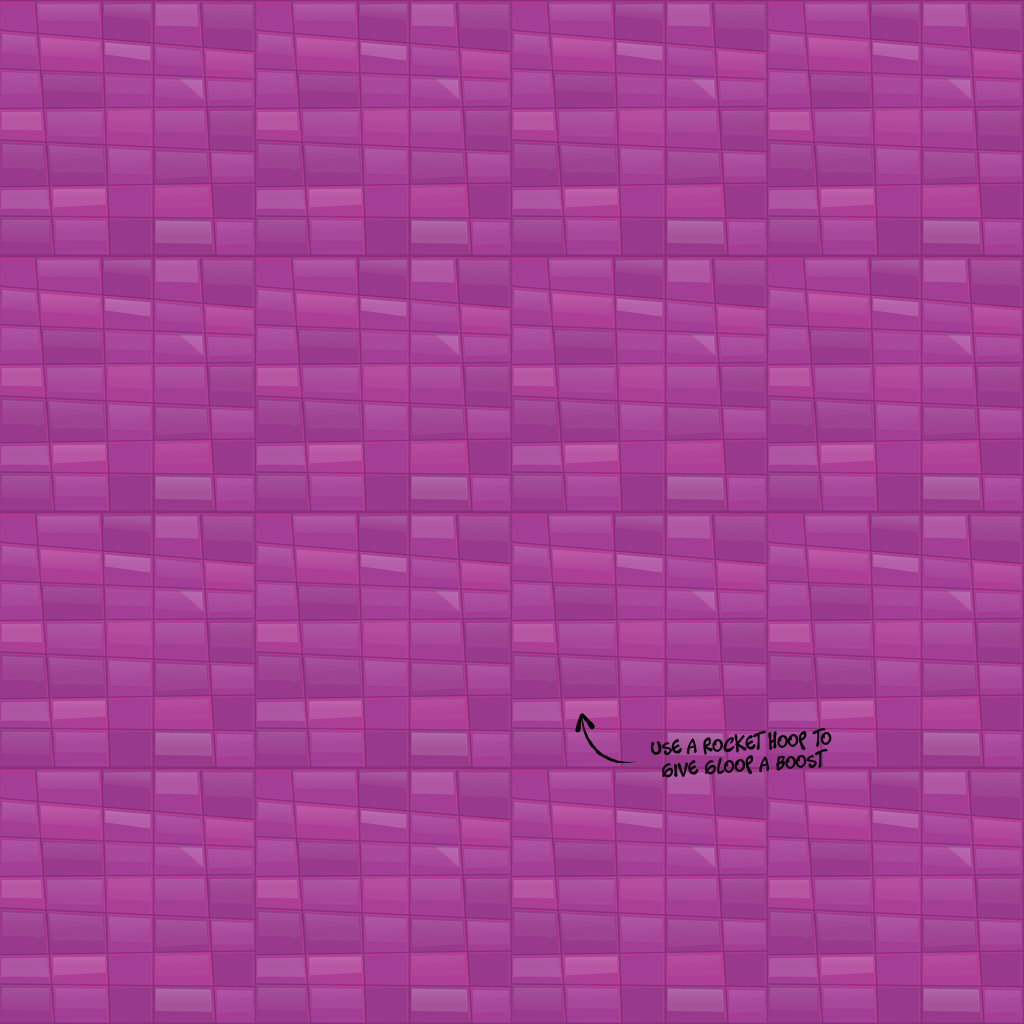
<style>
.page{position:relative;width:1024px;height:1024px}
.page>*{position:absolute;margin:0}
.t1{font:18px "Timotheos";letter-spacing:0.025em;color:#000000}
</style>
<div class="page">
<p class="t1" style="left:650px;top:727px;width:182px;height:51px;text-align:center;rotate:-3deg">use a rocket hoop to<br>give gloop a boost</p>
</div>
